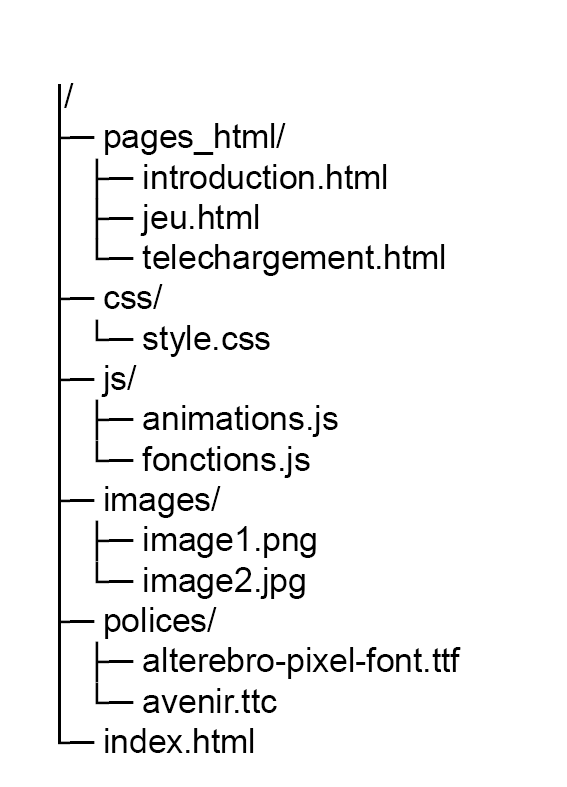
<style>
.page{position:relative;width:567px;height:787px;background:#ffffff}
.page>*{position:absolute;margin:0}
.t1{font:33.6px "ArialMT";color:#000000}
</style>
<div class="page">
<p class="t1" style="left:53px;top:83px;width:408px;height:670px">/<br>├─ pages_html/<br>│  ├─ introduction.html<br>│  ├─ jeu.html<br>│  └─ telechargement.html<br>├─ css/<br>│  └─ style.css<br>├─ js/<br>│  ├─ animations.js<br>│  └─ fonctions.js<br>├─ images/<br>│  ├─ image1.png<br>│  └─ image2.jpg<br>├─ polices/<br>│  ├─ alterebro-pixel-font.ttf<br>│  └─ avenir.ttc<br>└─ index.html</p>
</div>
